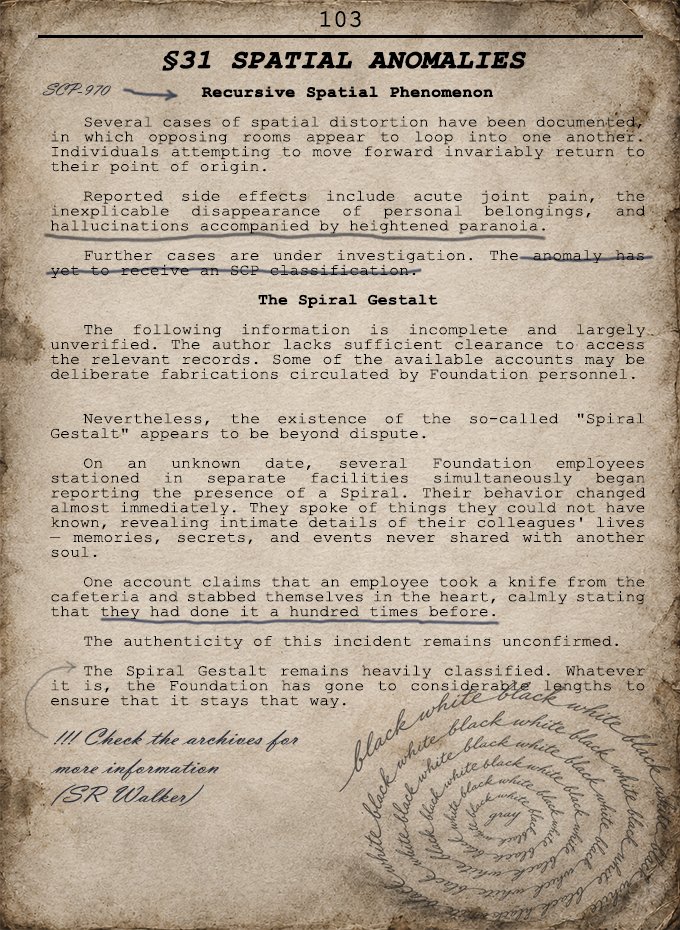
<style>
.page{position:relative;width:680px;height:930px}
.page>*{position:absolute;margin:0}
.t1{font:24px "CourierNewPSMT";color:#000000;text-transform:uppercase;font-weight:bold}
.t2{font:26.2px "CourierNewPS-BoldItalicMT";color:#000000;text-transform:uppercase;font-weight:bold;scale:1.06 1}
.t3{font:17.5px "VladimirScript";color:#2b3140;scale:1.06 1}
.t4{font:15.7px/14.8px "CourierNewPSMT";color:#000000;scale:1.06 1}
.t5{font:15.7px/14.8px "CourierNewPS-BoldMT";color:#000000;font-weight:bold;scale:1.06 1}
.t6{font:15.7px/14.8px "CourierNewPS-BoldMT";color:#000000;scale:1.06 1}
.t7{font:24px "VladimirScript";color:#2b303f;scale:1.23 1}
</style>
<div class="page">
<p class="t1" style="left:320px;top:11px;width:41px;height:17px">103</p>
<p class="t2" style="left:162px;top:50px;width:364px;height:21px">§31 Spatial Anomalies</p>
<p class="t3" style="left:42px;top:83px;width:69px;height:13px">SCP-970</p>
<p class="t4" style="left:49px;top:86px;width:597px;height:622px;text-align:justify"><span class="t5">Recursive Spatial Phenomenon<br></span><br> Several cases of spatial distortion have been documented, in which opposing rooms appear to loop into one another. Individuals attempting to move forward invariably return to their point of origin.<br><br> Reported side effects include acute joint pain, the inexplicable disappearance of personal belongings, and hallucinations accompanied by heightened paranoia.<br><br> Further cases are under investigation. The anomaly has yet to receive an SCP classification.<br><br><span class="t6">The Spiral Gestalt<br></span><br> The following information is incomplete and largely unverified. The author lacks sufficient clearance to access the relevant records. Some of the available accounts may be deliberate fabrications circulated by Foundation personnel.<br><br><br> Nevertheless, the existence of the so-called "Spiral Gestalt" appears to be beyond dispute.<br><br> On an unknown date, several Foundation employees stationed in separate facilities simultaneously began reporting the presence of a Spiral. Their behavior changed almost immediately. They spoke of things they could not have known, revealing intimate details of their colleagues' lives — memories, secrets, and events never shared with another soul.<br><br> One account claims that an employee took a knife from the cafeteria and stabbed themselves in the heart, calmly stating that they had done it a hundred times before.<br><br> The authenticity of this incident remains unconfirmed.<br><br> The Spiral Gestalt remains heavily classified. Whatever it is, the Foundation has gone to considerable lengths to ensure that it stays that way.</p>
<p class="t7" style="left:50px;top:728px;width:248px;height:78px">!!! Check the archives for more information<br>(SR Walker)</p>
</div>
